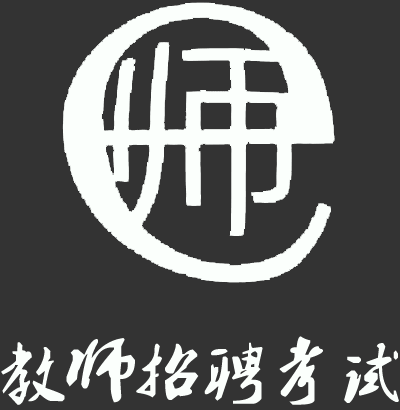
<style>
.page{position:relative;width:400px;height:410px;background:#333333}
.page>*{position:absolute;margin:0}
.t1{font:67.5px "2.0-";color:#fbfffc}
</style>
<div class="page">
<p class="t1" style="left:1px;top:336px;width:398px;height:69px">教师招聘考试</p>
</div>
